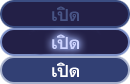
<style>
.page{position:relative;width:130px;height:84px;background:#232047}
.page>*{position:absolute;margin:0}
.t1{font:24px "TFPhethai";color:#485586}
.t2{font:24px "TFPhethai";color:#ced4ff}
.t3{font:24px "TFPhethai";color:#ffffff}
</style>
<div class="page">
<p class="t1" style="left:52px;top:6px;width:27px;height:15px">เปิด</p>
<p class="t2" style="left:52px;top:34px;width:27px;height:15px">เปิด</p>
<p class="t3" style="left:52px;top:62px;width:27px;height:15px">เปิด</p>
</div>
